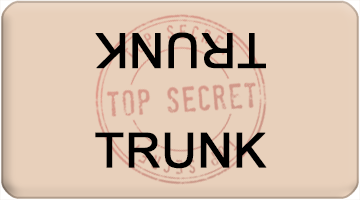
<style>
.page{position:relative;width:360px;height:200px;background:#e8d0bb}
.page>*{position:absolute;margin:0}
.t1{font:48px "ArialMT";color:#000000;font-weight:bold}
</style>
<div class="page">
<p class="t1" style="left:95px;top:32px;width:171px;height:37px;rotate:180deg">TRUNK</p>
<p class="t1" style="left:95px;top:132px;width:172px;height:37px">TRUNK</p>
</div>
